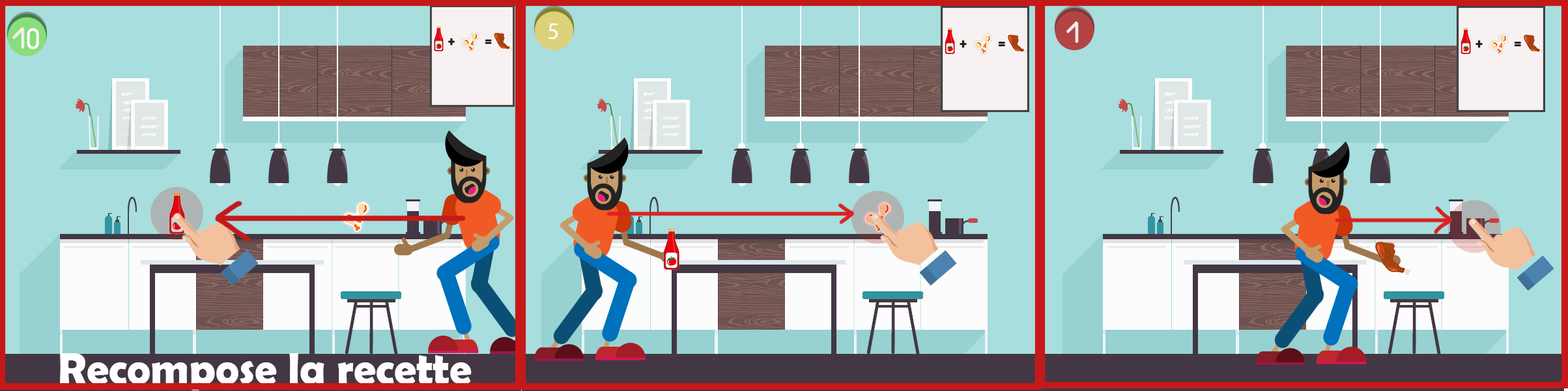
<style>
.page{position:relative;width:1568px;height:391px;background:#a8dede}
.page>*{position:absolute;margin:0}
.t1{font:44.2px "BerlinSansFBDemi-Bold";color:#ffffff}
</style>
<div class="page">
<p class="t1" style="left:60px;top:353px;width:412px;height:37px">Recompose la recette</p>
</div>
